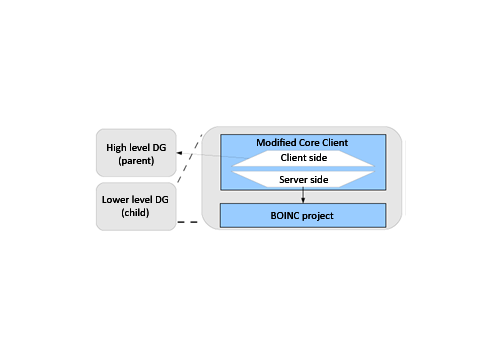
<style>
.page{position:relative;width:504px;height:360px;background:#ffffff}
.page>*{position:absolute;margin:0}
.t1{font:11px "Calibri";color:#000000}
</style>
<div class="page">
<p class="t1" style="left:107px;top:143px;width:59px;height:23px;text-align:center">High level DG<br>(parent)</p>
<p class="t1" style="left:257px;top:138px;width:91px;height:8px">Modified Core Client</p>
<p class="t1" style="left:281px;top:153px;width:46px;height:8px">Client side</p>
<p class="t1" style="left:279px;top:175px;width:49px;height:8px">Server side</p>
<p class="t1" style="left:102px;top:195px;width:66px;height:23px;text-align:center">Lower level DG<br>(child)</p>
<p class="t1" style="left:271px;top:212px;width:63px;height:9px">BOINC project</p>
</div>
